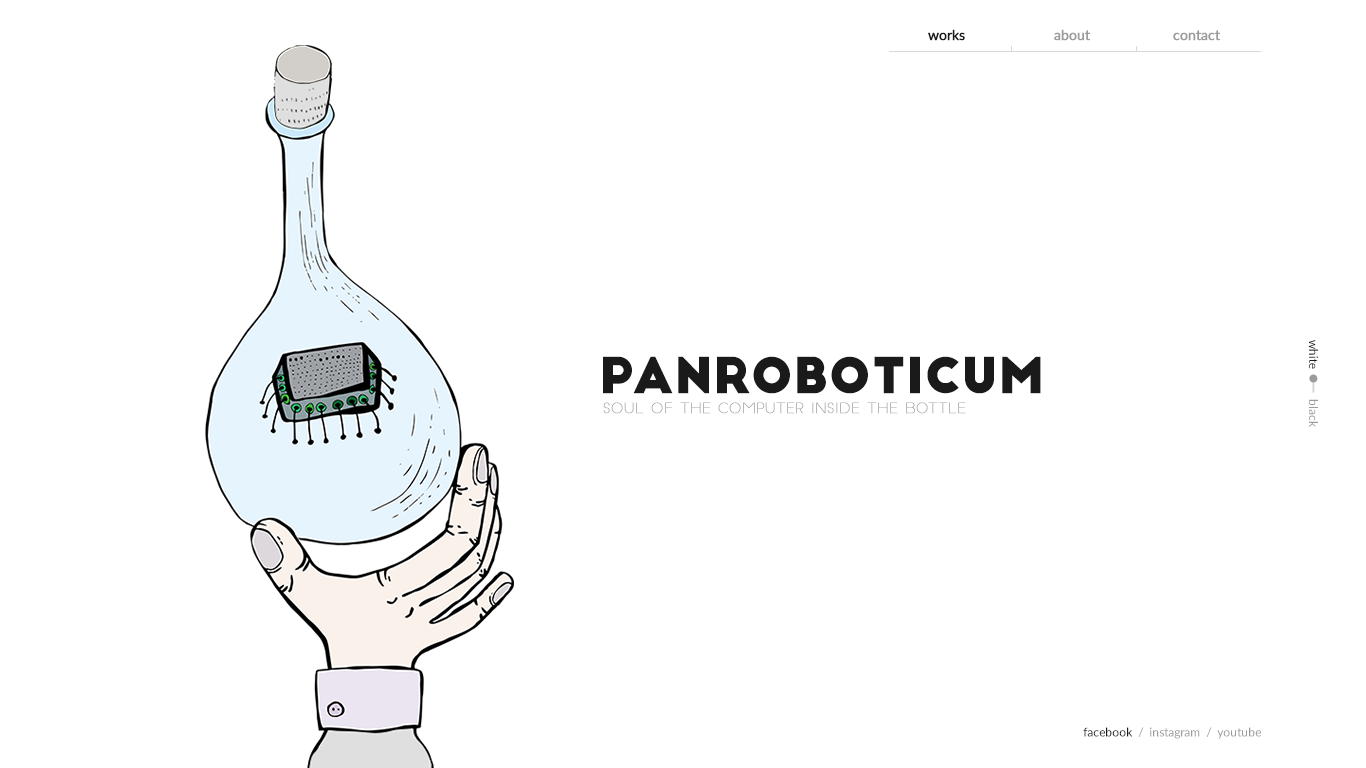
<style>
.page{position:relative;width:1366px;height:768px;background:#ffffff}
.page>*{position:absolute;margin:0}
.t1{font:14px "Lato-Regular";color:#1a1a1a;font-weight:bold}
.t2{font:14px "Lato-Regular";color:#9b9b9b;font-weight:bold}
.t3{font:12px "Lato-Regular";color:#1a1a1a}
.t4{font:12px "Lato-Regular";color:#9b9b9b}
.t5{font:48px "BigJohn";color:#1a1a1a;font-weight:bold}
.t6{font:14px "SlimJoe";font-weight:bold}
</style>
<div class="page">
<p class="t1" style="left:928px;top:29px;width:37px;height:12px">works</p>
<p class="t2" style="left:1054px;top:29px;width:37px;height:12px">about</p>
<p class="t2" style="left:1173px;top:30px;width:48px;height:11px">contact</p>
<p class="t3" style="left:1309px;top:340px;width:9px;height:87px;rotate:90deg">white          <span class="t4">black</span></p>
<p class="t5" style="left:603px;top:356px;width:438px;height:38px">PanRoboticum</p>
<p class="t6" style="left:603px;top:402px;width:363px;height:12px">Soul of the computer inside the bottle</p>
<p class="t4" style="left:1083px;top:727px;width:179px;height:12px"><span class="t3">facebook</span>  /  instagram  /  youtube</p>
</div>
